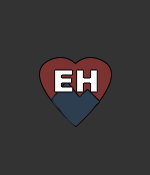
<style>
.page{position:relative;width:150px;height:175px;background:#333333}
.page>*{position:absolute;margin:0}
.t1{font:30px "Arial-Black";color:#fffefe}
</style>
<div class="page">
<p class="t1" style="left:54px;top:70px;width:44px;height:22px">EH</p>
</div>
